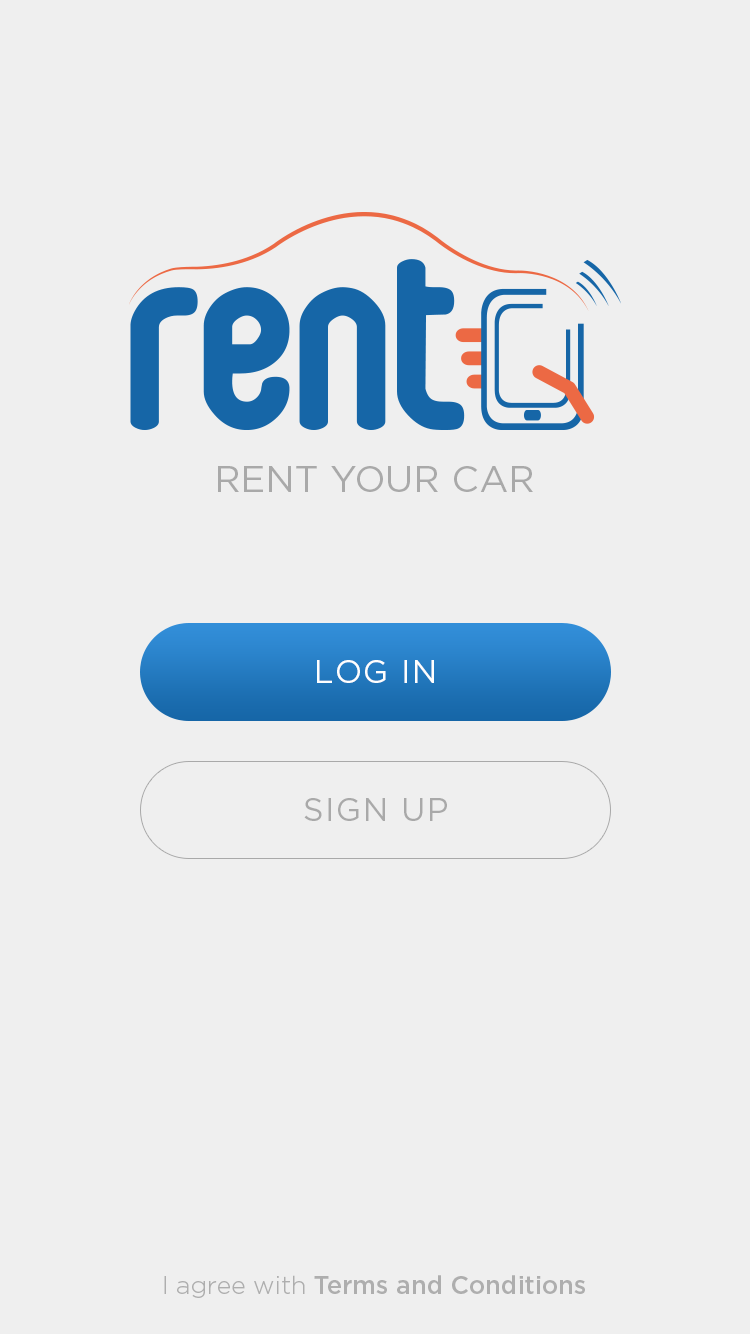
<style>
.page{position:relative;width:750px;height:1334px;background:#efefef}
.page>*{position:absolute;margin:0}
.t1{font:37px "Gotham-Book";color:#a9a9a9;text-transform:uppercase}
.t2{font:32px "Gotham-Book";letter-spacing:0.05em;color:#fefefe;text-transform:uppercase}
.t3{font:32px "Gotham-Book";letter-spacing:0.05em;color:#a9a9a9;text-transform:uppercase}
.t4{font:25px "Gotham-Medium";color:#aeaeae}
.t5{font:25px "Gotham-Light";color:#aeaeae}
</style>
<div class="page">
<p class="t1" style="left:218px;top:466px;width:315px;height:26px">rent your car</p>
<p class="t2" style="left:317px;top:660px;width:117px;height:23px">Log In</p>
<p class="t3" style="left:304px;top:798px;width:143px;height:23px">Sign up</p>
<p class="t4" style="left:164px;top:1275px;width:421px;height:23px"><span class="t5">I agree with </span>Terms and Conditions</p>
</div>
